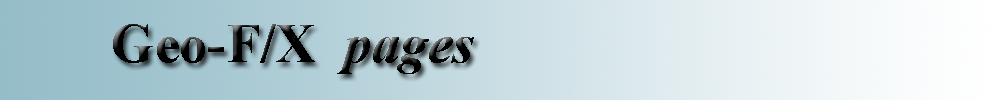
<style>
.page{position:relative;width:1000px;height:100px}
.page>*{position:absolute;margin:0}
.t1{font:56px "TimesNewRomanPS-BoldMT";color:#000000}
.t2{font:56px "TimesNewRomanPS-BoldItalicMT";color:#000000}
</style>
<div class="page">
<p class="t1" style="left:113px;top:24px;width:361px;height:50px">Geo-F/X  <span class="t2">pages</span></p>
</div>
